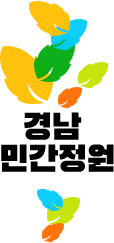
<style>
.page{position:relative;width:114px;height:243px;background:#ffffff}
.page>*{position:absolute;margin:0}
.t1{font:36px/32px "BlackHanSans-Regular";color:#000000}
</style>
<div class="page">
<p class="t1" style="left:1px;top:112px;width:113px;height:60px;text-align:center">경남 <br>민간정원</p>
</div>
